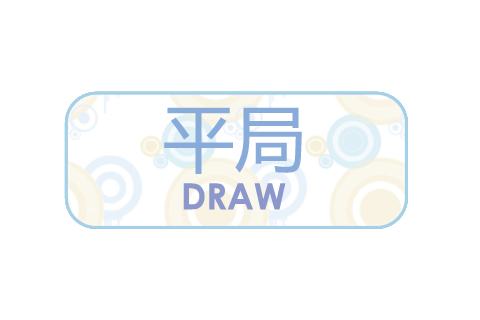
<style>
.page{position:relative;width:480px;height:320px;background:#ffffff}
.page>*{position:absolute;margin:0}
.t1{font:72px "MicrosoftYaHei";color:#88abda}
.t2{font:36px "CenturyGothic-Bold";color:#8c97cb}
</style>
<div class="page">
<p class="t1" style="left:164px;top:107px;width:138px;height:67px">平局</p>
<p class="t2" style="left:183px;top:183px;width:103px;height:27px">DRAW</p>
</div>
